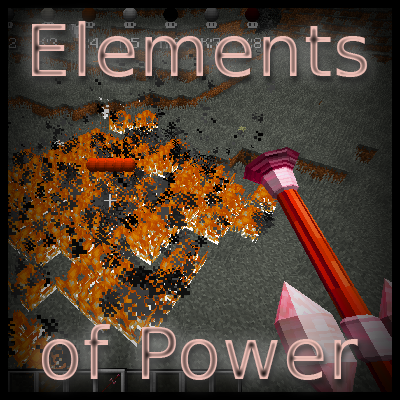
<style>
.page{position:relative;width:400px;height:400px}
.page>*{position:absolute;margin:0}
.t1{font:72px/101px "DejaVuSans";letter-spacing:0.02em}
</style>
<div class="page">
<p class="t1" style="left:32px;top:21px;width:335px;height:359px;text-align:center">Elements<br><br><br>of Power</p>
</div>
